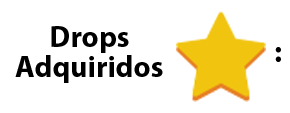
<style>
.page{position:relative;width:290px;height:113px;background:#ffffff}
.page>*{position:absolute;margin:0}
.t1{font:30px/30px "MyriadPro-Bold";color:#000000}
.t2{font:30px "MyriadPro-Bold";color:#000000}
.t3{font:30px "MyriadPro-Bold";color:#ffffff}
</style>
<div class="page">
<p class="t1" style="left:15px;top:26px;width:148px;height:57px;text-align:center">Drops<br>Adquiridos</p>
<p class="t2" style="left:275px;top:47px;width:6px;height:15px"><span class="t3"><br></span>:</p>
</div>
